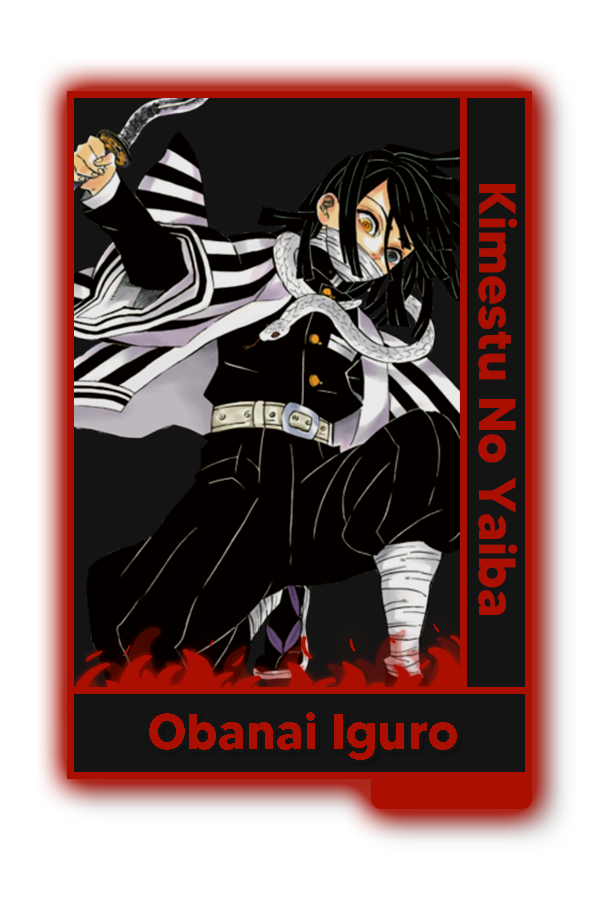
<style>
.page{position:relative;width:600px;height:900px;background:#ffffff}
.page>*{position:absolute;margin:0}
.t1{font:52px "MADETOMMY-Bold";color:#ab0f01}
.t2{font:50.5px "MADETOMMY-Bold";color:#ab0f01}
</style>
<div class="page">
<p class="t1" style="left:478px;top:184px;width:40px;height:431px;rotate:90deg">Kimestu No Yaiba</p>
<p class="t2" style="left:149px;top:712px;width:308px;height:48px">Obanai Iguro</p>
</div>
